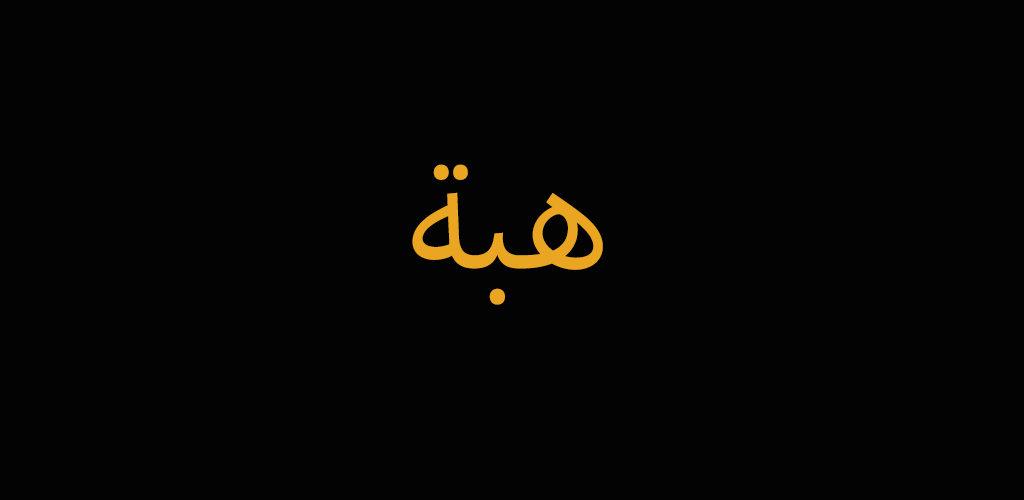
<style>
.page{position:relative;width:1024px;height:500px;background:#030303}
.page>*{position:absolute;margin:0}
.t1{font:200px "MyriadArabic-Regular";letter-spacing:0.02em;color:#eaa622}
</style>
<div class="page">
<p class="t1" style="left:412px;top:164px;width:191px;height:141px">هبة</p>
</div>
